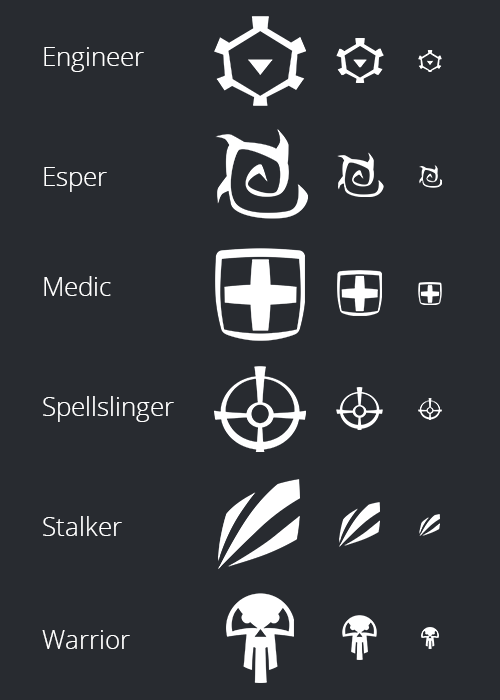
<style>
.page{position:relative;width:500px;height:700px;background:#282b30}
.page>*{position:absolute;margin:0}
.t1{font:26px "OpenSans-Light";color:#ffffff}
</style>
<div class="page">
<p class="t1" style="left:44px;top:47px;width:100px;height:25px">Engineer</p>
<p class="t1" style="left:44px;top:167px;width:63px;height:25px">Esper</p>
<p class="t1" style="left:44px;top:276px;width:67px;height:20px">Medic</p>
<p class="t1" style="left:43px;top:396px;width:131px;height:26px">Spellslinger</p>
<p class="t1" style="left:43px;top:516px;width:79px;height:20px">Stalker</p>
<p class="t1" style="left:42px;top:630px;width:88px;height:19px">Warrior</p>
</div>
